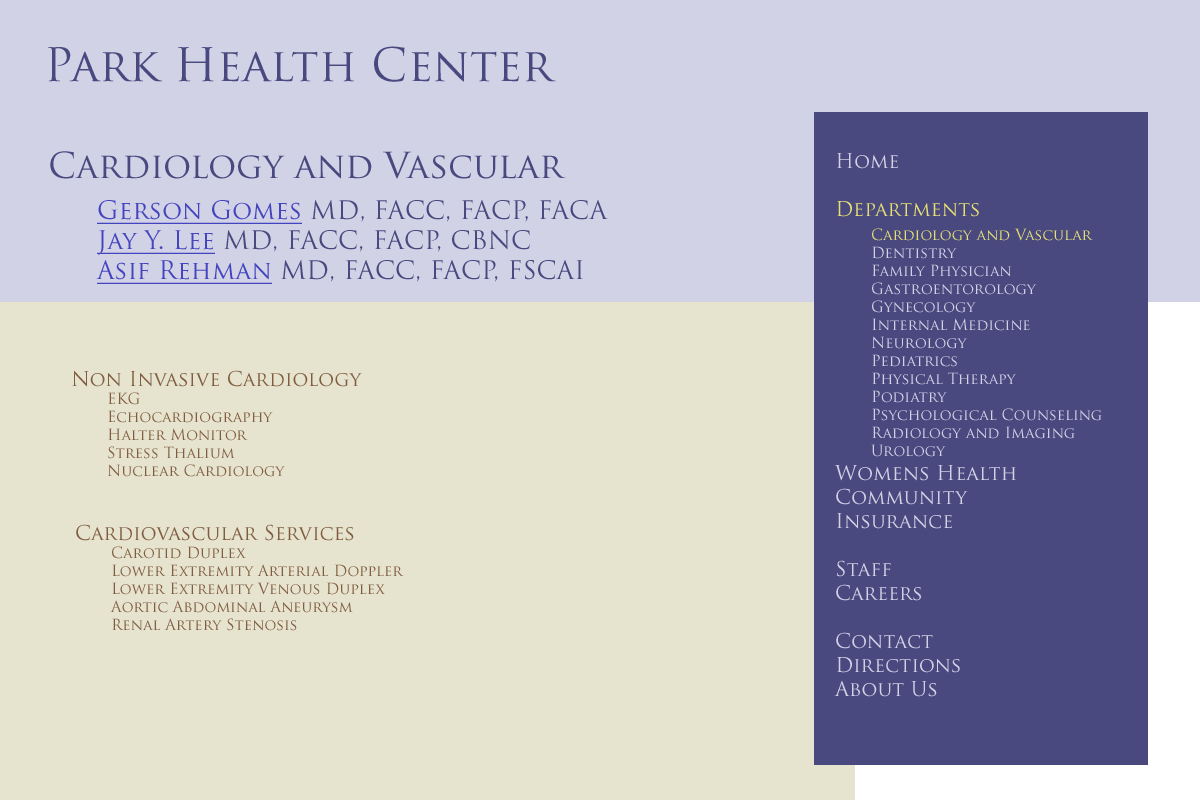
<style>
.page{position:relative;width:1200px;height:800px;background:#e6e3cf}
.page>*{position:absolute;margin:0}
.t1{font:45px "TrajanPro-Regular";color:#494980}
.t2{font:35px "TrajanPro-Regular";color:#494980}
.t3{font:15px "TrajanPro-Regular";color:#d2d2e6}
.t4{font:20px "TrajanPro-Regular";color:#d2d2e6}
.t5{font:20px "TrajanPro-Regular";color:#e6e073}
.t6{font:15px "TrajanPro-Regular";color:#e6e073}
.t7{font:25px "TrajanPro-Regular";color:#494980}
.t8{font:25px "TrajanPro-Regular";color:#4444bf;text-decoration:underline}
.t9{font:15px "TrajanPro-Regular";color:#805d40}
.t10{font:20px "TrajanPro-Regular";color:#805d40}
</style>
<div class="page">
<p class="t1" style="left:48px;top:46px;width:508px;height:36px">Park Health Center</p>
<p class="t2" style="left:50px;top:151px;width:516px;height:28px">Cardiology and Vascular</p>
<p class="t3" style="left:834px;top:153px;width:268px;height:544px"><span class="t4">Home<br><br></span><span class="t5">Departments<br> </span><span class="t6">Cardiology and Vascular<br></span> Dentistry<br> Family Physician<br> Gastroentorology<br> Gynecology<br> Internal Medicine<br> Neurology<br> Pediatrics<br> Physical Therapy<br> Podiatry<br> Psychological Counseling<br> Radiology and Imaging<br> Urology<br><span class="t4">Womens Health<br>Community<br>Insurance<br><br>Staff<br>Careers<br><br>Contact<br>Directions<br>About Us</span></p>
<p class="t7" style="left:96px;top:200px;width:512px;height:84px"><span class="t8">Gerson Gomes</span> MD, FACC, FACP, FACA<br><span class="t8">Jay Y. Lee</span> MD, FACC, FACP, CBNC<br><span class="t8">Asif Rehman</span> MD, FACC, FACP, FSCAI</p>
<p class="t9" style="left:72px;top:370px;width:290px;height:107px"><span class="t10">Non Invasive Cardiology<br></span> EKG<br> Echocardiography<br> Halter Monitor<br> Stress Thalium<br> Nuclear Cardiology</p>
<p class="t9" style="left:76px;top:524px;width:328px;height:107px"><span class="t10">Cardiovascular Services<br></span> Carotid Duplex<br> Lower Extremity Arterial Doppler<br> Lower Extremity Venous Duplex<br> Aortic Abdominal Aneurysm<br> Renal Artery Stenosis</p>
</div>
